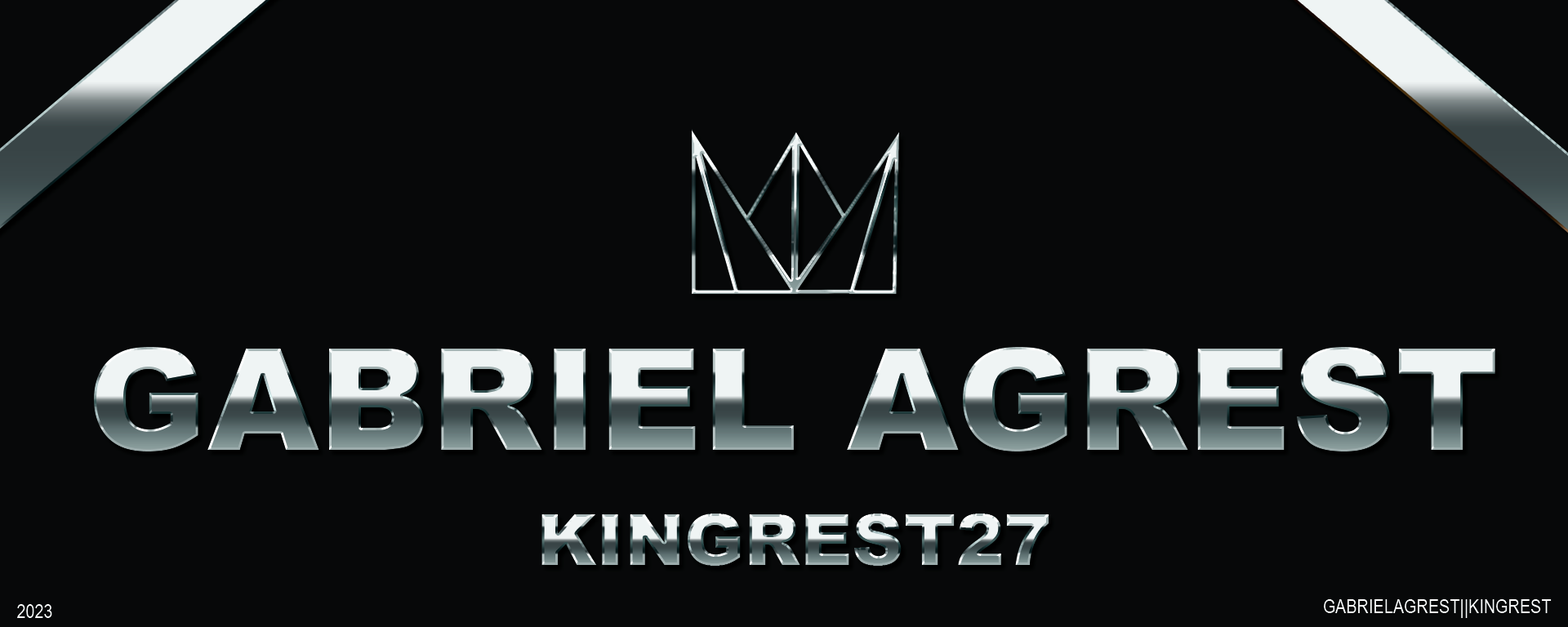
<style>
.page{position:relative;width:1568px;height:627px;background:#070809}
.page>*{position:absolute;margin:0}
.t1{font:141.7px "Arial-Black";letter-spacing:0.005em;text-transform:uppercase}
.t2{font:70.8px "Arial-Black";letter-spacing:0.005em;text-transform:uppercase}
.t3{font:19.6px "ArialNarrow";letter-spacing:0.005em;color:#ffffff;text-transform:uppercase}
</style>
<div class="page">
<p class="t1" style="left:94px;top:347px;width:1401px;height:105px">Gabriel Agrest</p>
<p class="t2" style="left:541px;top:514px;width:508px;height:52px">Kingrest27</p>
<p class="t3" style="left:17px;top:604px;width:35px;height:14px">2023</p>
<p class="t3" style="left:1324px;top:599px;width:228px;height:19px">gabrielagrest||kingrest</p>
</div>
